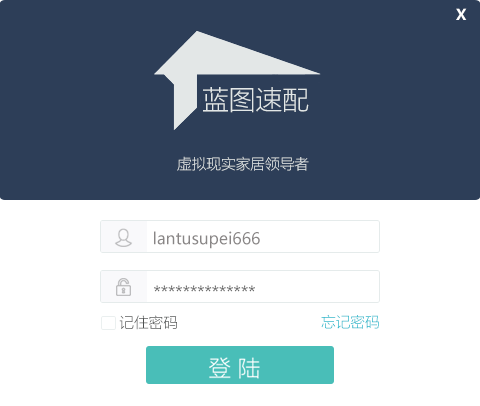
<style>
.page{position:relative;width:480px;height:406px;background:#2d3e58}
.page>*{position:absolute;margin:0}
.t1{font:14.7px "MicrosoftYaHeiUI-Bold";color:#ffffff}
.t2{font:26.8px "MicrosoftYaHeiUILight";color:#e2e7e7}
.t3{font:14.7px "MicrosoftYaHeiUILight";color:#e2e7e7}
.t4{font:16px "MicrosoftYaHei";color:#898686}
.t5{font:12px "MicrosoftYaHei";color:#696969}
.t6{font:14.7px "MicrosoftYaHeiUILight";color:#4d5050}
.t7{font:14.7px "MicrosoftYaHeiUILight"}
</style>
<div class="page">
<p class="t1" style="left:456px;top:8px;width:11px;height:12px">X</p>
<p class="t2" style="left:203px;top:87px;width:106px;height:26px">蓝图速配</p>
<p class="t3" style="left:177px;top:156px;width:132px;height:15px">虚拟现实家居领导者</p>
<p class="t4" style="left:154px;top:231px;width:106px;height:18px">lantusupei666</p>
<p class="t5" style="left:154px;top:285px;width:101px;height:7px">**************</p>
<p class="t6" style="left:119px;top:315px;width:58px;height:15px">记住密码</p>
<p class="t7" style="left:321px;top:314px;width:58px;height:15px">忘记密码</p>
</div>
